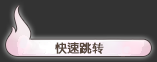
<style>
.page{position:relative;width:157px;height:62px;background:#333333}
.page>*{position:absolute;margin:0}
.t1{font:12px "AdobeFanHeitiStd-Bold";color:#59493f;font-weight:bold}
.t2{font:12px "AdobeHeitiStd-Regular";color:#59493f;font-weight:bold}
</style>
<div class="page">
<p class="t1" style="left:55px;top:42px;width:49px;height:12px">快速跳<span class="t2">转</span></p>
</div>
